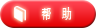
<style>
.page{position:relative;width:96px;height:28px}
.page>*{position:absolute;margin:0}
.t1{font:14px "STHeitiTC-Light";letter-spacing:0.15em;color:#ffffff;scale:0.74 1}
</style>
<div class="page">
<p class="t1" style="left:41px;top:7px;width:31px;height:13px">帮  助</p>
</div>
